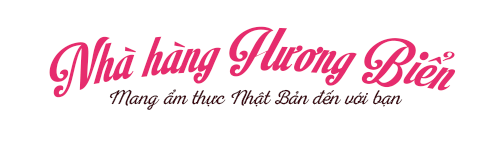
<style>
.page{position:relative;width:504px;height:141px;background:#ffffff}
.page>*{position:absolute;margin:0}
.t1{font:62.2px "SVN-MotionPicture";color:#e62c6e;font-style:italic}
.t2{font:20.1px "SVN-NexaRushScript";color:#3b0a12;font-style:italic}
</style>
<div class="page">
<p class="t1" style="left:49px;top:26px;width:407px;height:72px">Nhà hàng Hương Biển</p>
<p class="t2" style="left:109px;top:89px;width:294px;height:21px">Mang ẩm thực Nhật Bản đến với bạn</p>
</div>
